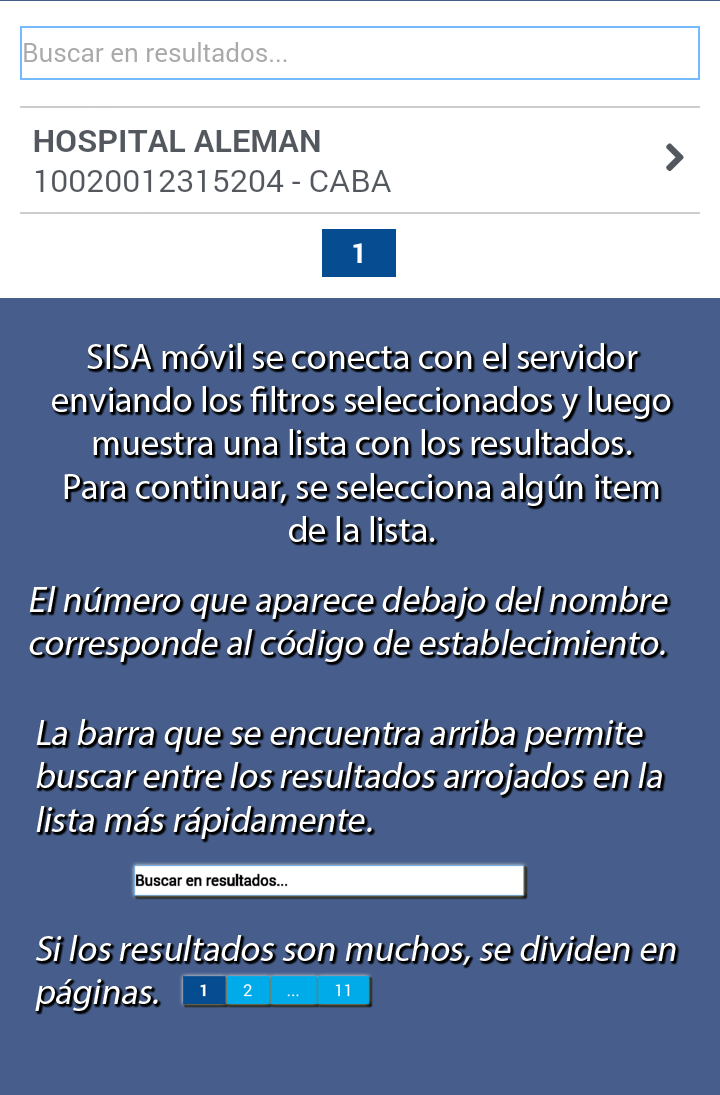
<style>
.page{position:relative;width:720px;height:1095px;background:#475e8c}
.page>*{position:absolute;margin:0}
.t1{font:36px "MyriadPro-Regular";color:#ffffff}
.t2{font:36px "MyriadPro-Regular";color:#ffffff;font-style:italic}
</style>
<div class="page">
<p class="t1" style="left:52px;top:343px;width:619px;height:199px;text-align:center">SISA móvil se conecta con el servidor<br>enviando los filtros seleccionados y luego<br>muestra una lista con los resultados.<br>Para continuar, se selecciona algún item<br>de la lista.</p>
<p class="t2" style="left:29px;top:586px;width:639px;height:76px">El número que aparece debajo del nombre<br>corresponde al código de establecimiento.</p>
<p class="t2" style="left:35px;top:719px;width:641px;height:292px">La barra que se encuentra arriba permite<br>buscar entre los resultados arrojados en la<br>lista más rápidamente.<br><br><br>Si los resultados son muchos, se dividen en <br>páginas.</p>
</div>
